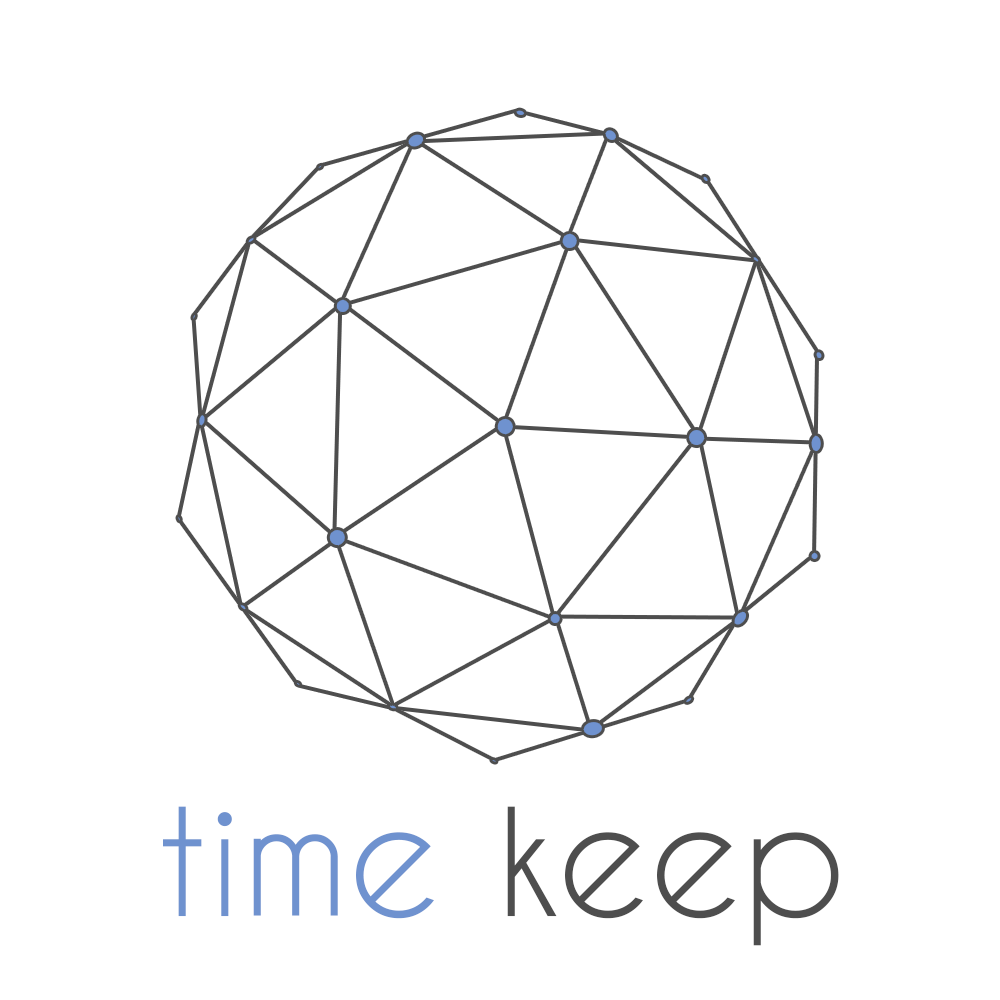
<style>
.page{position:relative;width:1000px;height:1000px;background:#ffffff}
.page>*{position:absolute;margin:0}
.t1{font:159.9px "CaviarDreams";color:#6f92cf}
.t2{font:159.9px "CaviarDreams";color:#4e4e4e}
</style>
<div class="page">
<p class="t1" style="left:163px;top:806px;width:676px;height:140px">time <span class="t2">keep</span></p>
</div>
